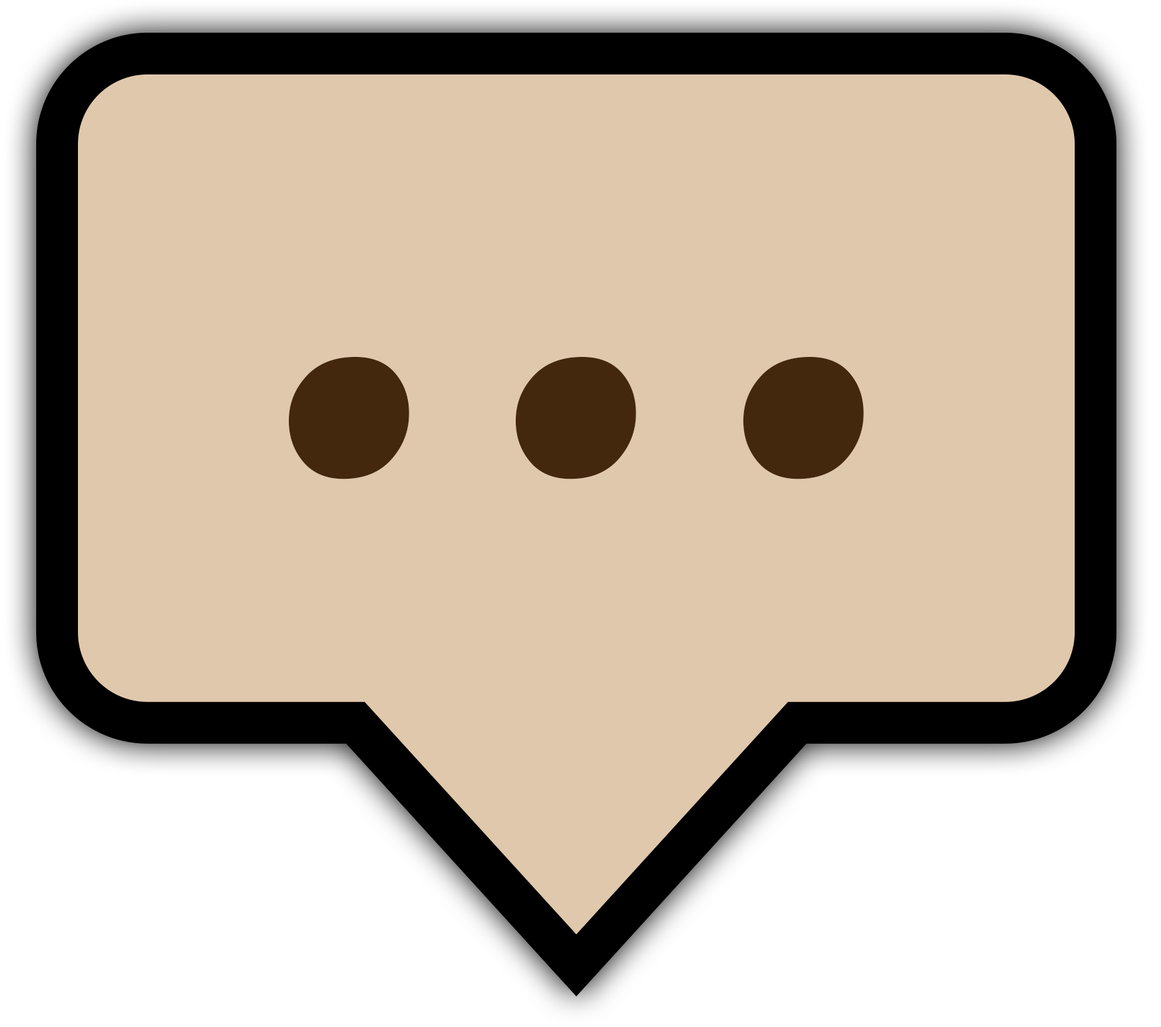
<style>
.page{position:relative;width:1161px;height:1027px;background:#e0c8ad}
.page>*{position:absolute;margin:0}
.t1{font:901.9px "Candara";color:#43280d}
</style>
<div class="page">
<p class="t1" style="left:288px;top:356px;width:576px;height:124px">...</p>
</div>
